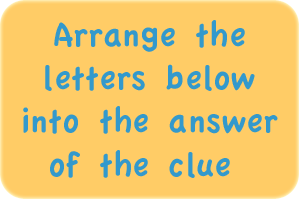
<style>
.page{position:relative;width:300px;height:200px;background:#ffcc66}
.page>*{position:absolute;margin:0}
.t1{font:36px "AppleCasual";color:#3399cc}
</style>
<div class="page">
<p class="t1" style="left:23px;top:20px;width:255px;height:158px;text-align:center">Arrange the<br>letters below<br>into the answer<br>of the clue</p>
</div>
